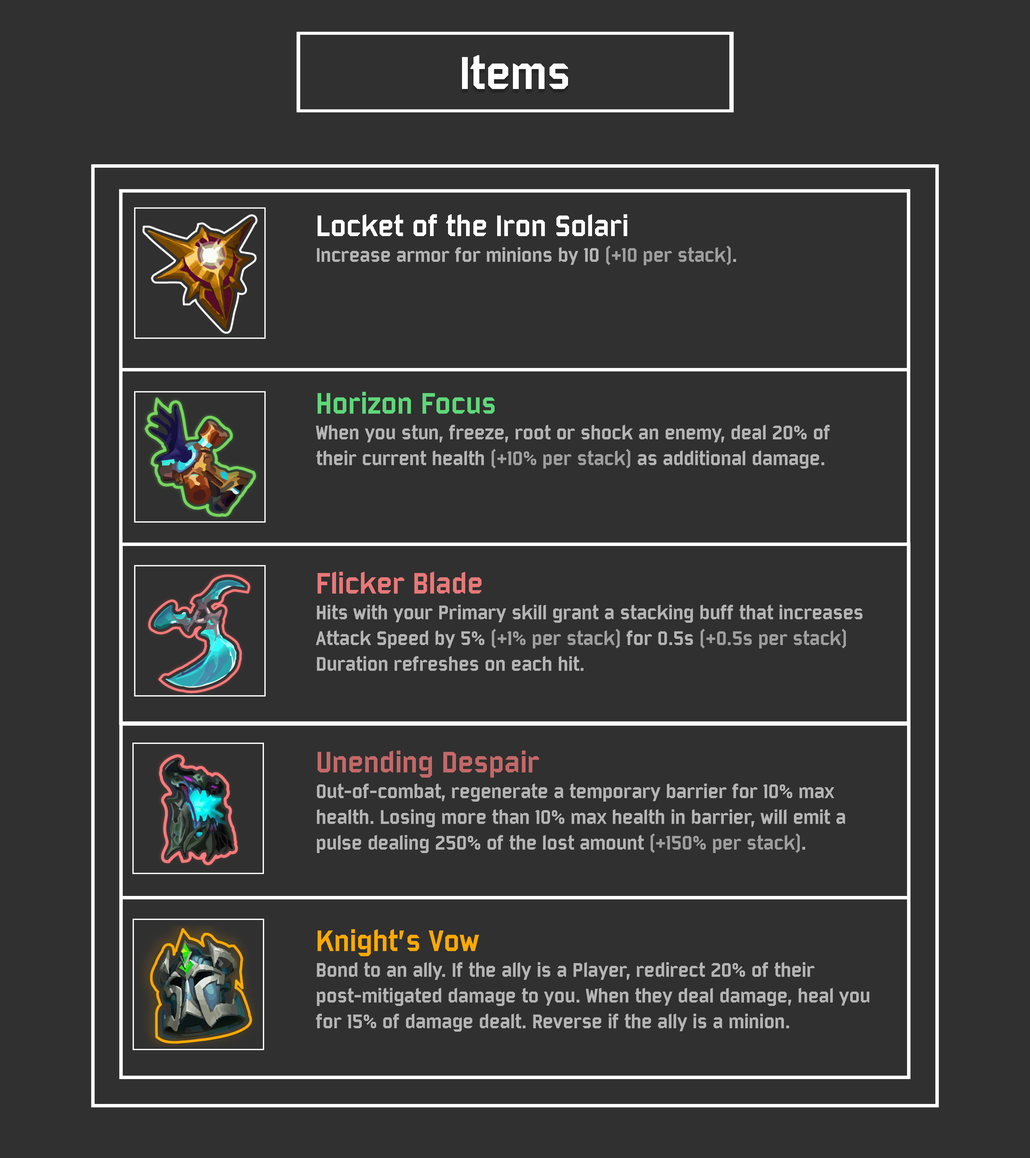
<style>
.page{position:relative;width:1030px;height:1158px;background:#303030}
.page>*{position:absolute;margin:0}
.t1{font:21.4px "Bombardier";color:#b4b4b4}
.t2{font:32.2px "Bombardier";color:#ffffff}
.t3{font:21.4px "Bombardier";color:#9e9e9e}
.t4{font:32.2px "Bombardier";color:#5ed878}
.t5{font:32.2px "Bombardier";color:#e97878}
.t6{font:32.2px "Bombardier";color:#c46868}
.t7{font:32.2px "Bombardier";color:#fda900}
</style>
<div class="page">
<p class="t1" style="left:317px;top:214px;width:419px;height:51px"><span class="t2">Locket of the Iron Solari<br></span>Increase armor for minions by 10 <span class="t3">(+10 per stack)</span>.</p>
<p class="t1" style="left:316px;top:392px;width:513px;height:77px"><span class="t4">Horizon Focus<br></span>When you stun, freeze, root or shock an enemy, deal 20% of their current health <span class="t3">(+10% per stack)</span> as additional damage.</p>
<p class="t1" style="left:316px;top:572px;width:546px;height:99px"><span class="t5">Flicker Blade<br></span>Hits with your Primary skill grant a stacking buff that increases Attack Speed by 5% <span class="t3">(+1% per stack)</span> for 0.5s <span class="t3">(+0.5s per stack)</span> Duration refreshes on each hit.</p>
<p class="t1" style="left:317px;top:751px;width:528px;height:102px"><span class="t6">Unending Despair<br></span>Out-of-combat, regenerate a temporary barrier for 10% max health. Losing more than 10% max health in barrier, will emit a pulse dealing 250% of the lost amount <span class="t3">(+150% per stack)</span>.</p>
<p class="t1" style="left:316px;top:929px;width:553px;height:103px"><span class="t7">Knight’s Vow<br></span>Bond to an ally. If the ally is a Player, redirect 20% of their post-mitigated damage to you. When they deal damage, heal you for 15% of damage dealt. Reverse if the ally is a minion.</p>
</div>
